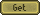
<style>
.page{position:relative;width:40px;height:15px;background:#373319}
.page>*{position:absolute;margin:0}
.t1{font:10px "Munro";color:#373319}
</style>
<div class="page">
<p class="t1" style="left:13px;top:4px;width:13px;height:7px">Get</p>
</div>
